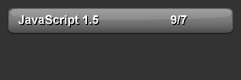
<style>
.page{position:relative;width:241px;height:80px;background:#333333}
.page>*{position:absolute;margin:0}
.t1{font:12px "Arial-BoldMT";color:#ffffff}
</style>
<div class="page">
<p class="t1" style="left:18px;top:15px;width:81px;height:12px">JavaScript 1.5</p>
<p class="t1" style="left:170px;top:15px;width:17px;height:9px">9/7</p>
</div>
